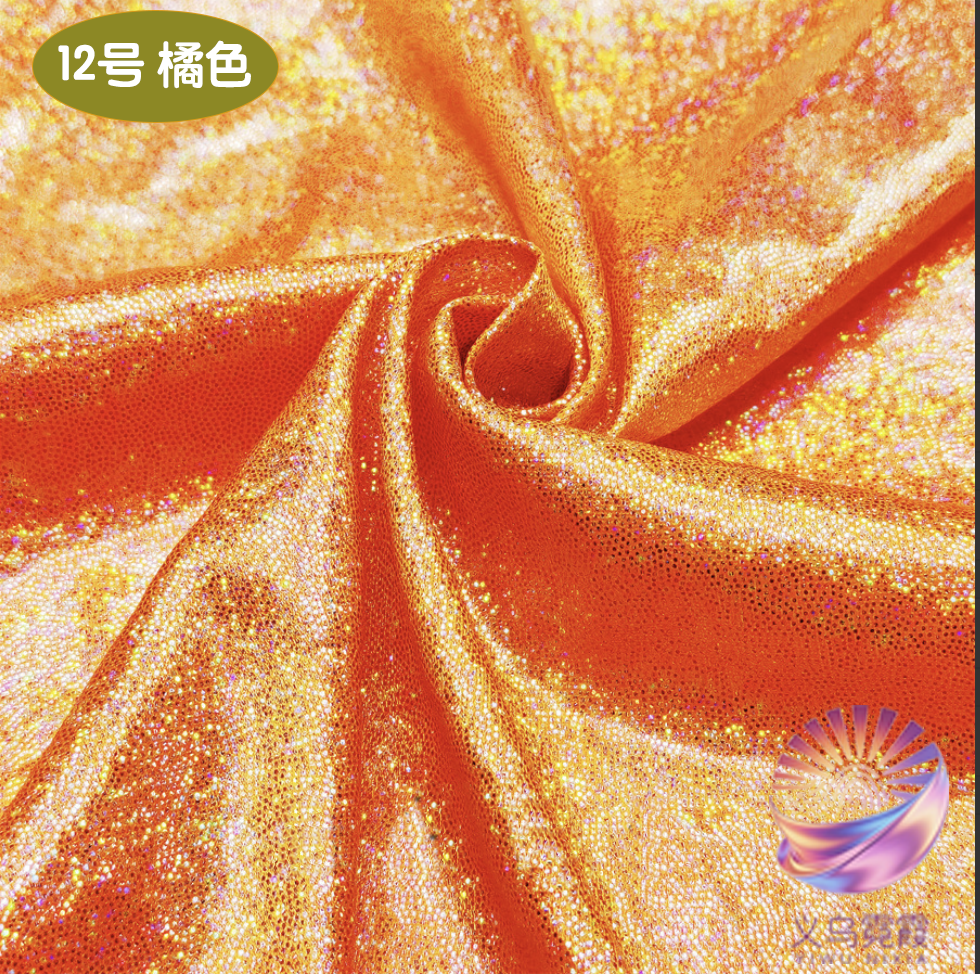
<style>
.page{position:relative;width:980px;height:974px}
.page>*{position:absolute;margin:0}
.t1{font:49.1px "STYuanti-SC-Bold";color:#ffffff;scale:0.97 1}
.t2{font:84.6px "STBaoliSC-Regular";color:#ffffff;scale:0.97 1}
</style>
<div class="page">
<p class="t1" style="left:58px;top:40px;width:193px;height:49px"><span class="t2">         </span>12号 橘色</p>
</div>
